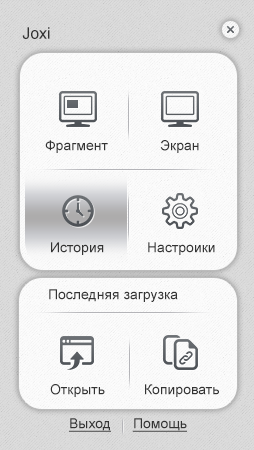
<style>
.page{position:relative;width:254px;height:450px}
.page>*{position:absolute;margin:0}
.t1{font:15.9px "ArialMT";color:#333333}
.t2{font:14px "ArialMT";color:#333333}
.t3{font:14px "ArialMT";color:#333333;text-decoration:underline}
</style>
<div class="page">
<p class="t1" style="left:22px;top:27px;width:28px;height:12px">Joxi</p>
<p class="t2" style="left:45px;top:140px;width:63px;height:13px">Фрагмент</p>
<p class="t2" style="left:160px;top:140px;width:39px;height:13px">Экран</p>
<p class="t2" style="left:51px;top:242px;width:53px;height:13px">История</p>
<p class="t2" style="left:148px;top:242px;width:67px;height:13px">Настроики</p>
<p class="t2" style="left:49px;top:289px;width:129px;height:13px">Последняя загрузка</p>
<p class="t2" style="left:50px;top:384px;width:55px;height:13px">Открыть</p>
<p class="t2" style="left:145px;top:384px;width:74px;height:13px">Копировать</p>
<p class="t3" style="left:69px;top:418px;width:42px;height:14px">Выход</p>
<p class="t3" style="left:132px;top:418px;width:55px;height:14px">Помощь</p>
</div>
